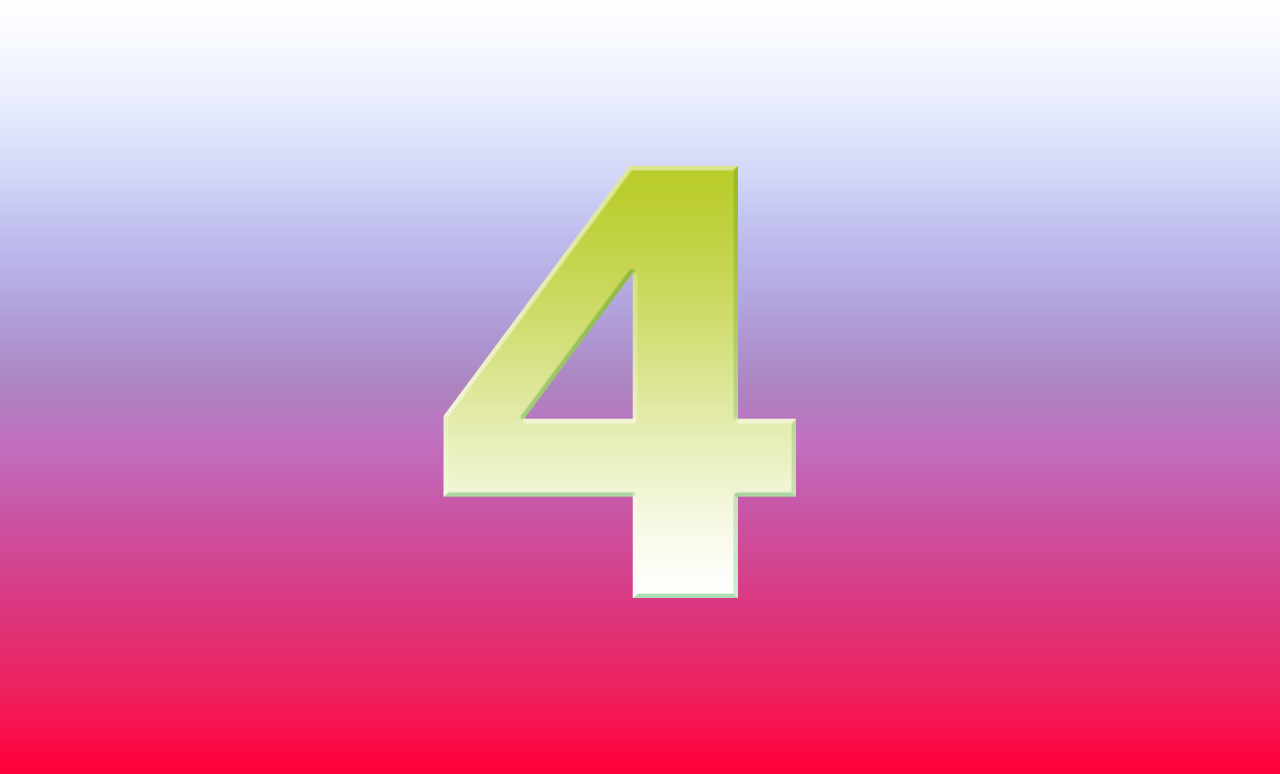
<style>
.page{position:relative;width:1280px;height:774px}
.page>*{position:absolute;margin:0}
.t1{font:592.3px "Tahoma-Bold"}
</style>
<div class="page">
<p class="t1" style="left:443px;top:165px;width:353px;height:433px">4</p>
</div>
